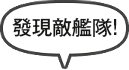
<style>
.page{position:relative;width:129px;height:70px;background:#ffffff}
.page>*{position:absolute;margin:0}
.t1{font:20px "GothicMB101Pr6N-Medium";color:#181817}
</style>
<div class="page">
<p class="t1" style="left:12px;top:17px;width:105px;height:20px">發現敵艦隊!</p>
</div>
